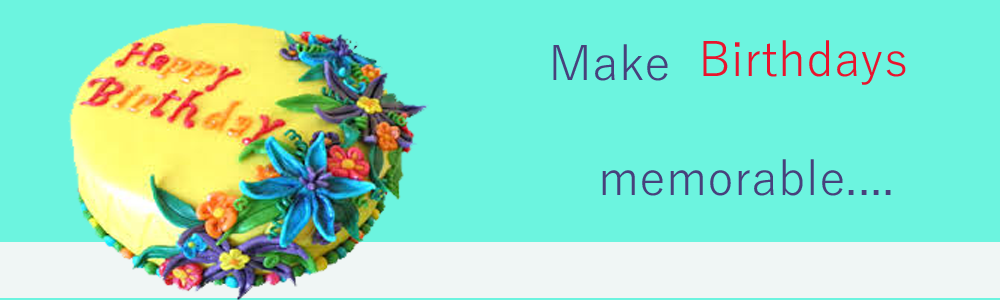
<style>
.page{position:relative;width:1000px;height:300px;background:#6cf4df}
.page>*{position:absolute;margin:0}
.t1{font:48px "YuGothic-Regular";color:#47417c}
.t2{font:48px "MongolianBaiti";color:#47417c}
.t3{font:48px "YuGothic-Regular";color:#e9142d}
</style>
<div class="page">
<p class="t1" style="left:553px;top:40px;width:353px;height:156px"><span class="t2"><br>     </span>Make  <span class="t3">Birthdays <br></span><br>        memorable....</p>
</div>
